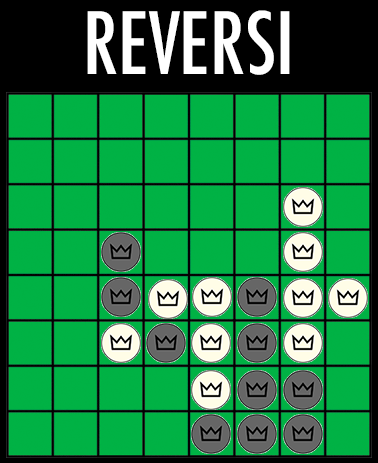
<style>
.page{position:relative;width:378px;height:463px;background:#000000}
.page>*{position:absolute;margin:0}
.t1{font:83.3px "Futura-CondensedMedium";color:#ffffff}
</style>
<div class="page">
<p class="t1" style="left:87px;top:10px;width:203px;height:65px">REVERSI</p>
</div>
